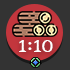
<style>
.page{position:relative;width:70px;height:70px;background:#333333}
.page>*{position:absolute;margin:0}
.t1{font:18px "ChosunCentennial";letter-spacing:-0.05em;color:#ffffff;scale:1.11 1}
.t2{font:20px "ChosunCentennial";letter-spacing:-0.06em;color:#ffffff}
</style>
<div class="page">
<p class="t1" style="left:19px;top:40px;width:34px;height:12px"><span class="t2"><br></span>1:10</p>
</div>
